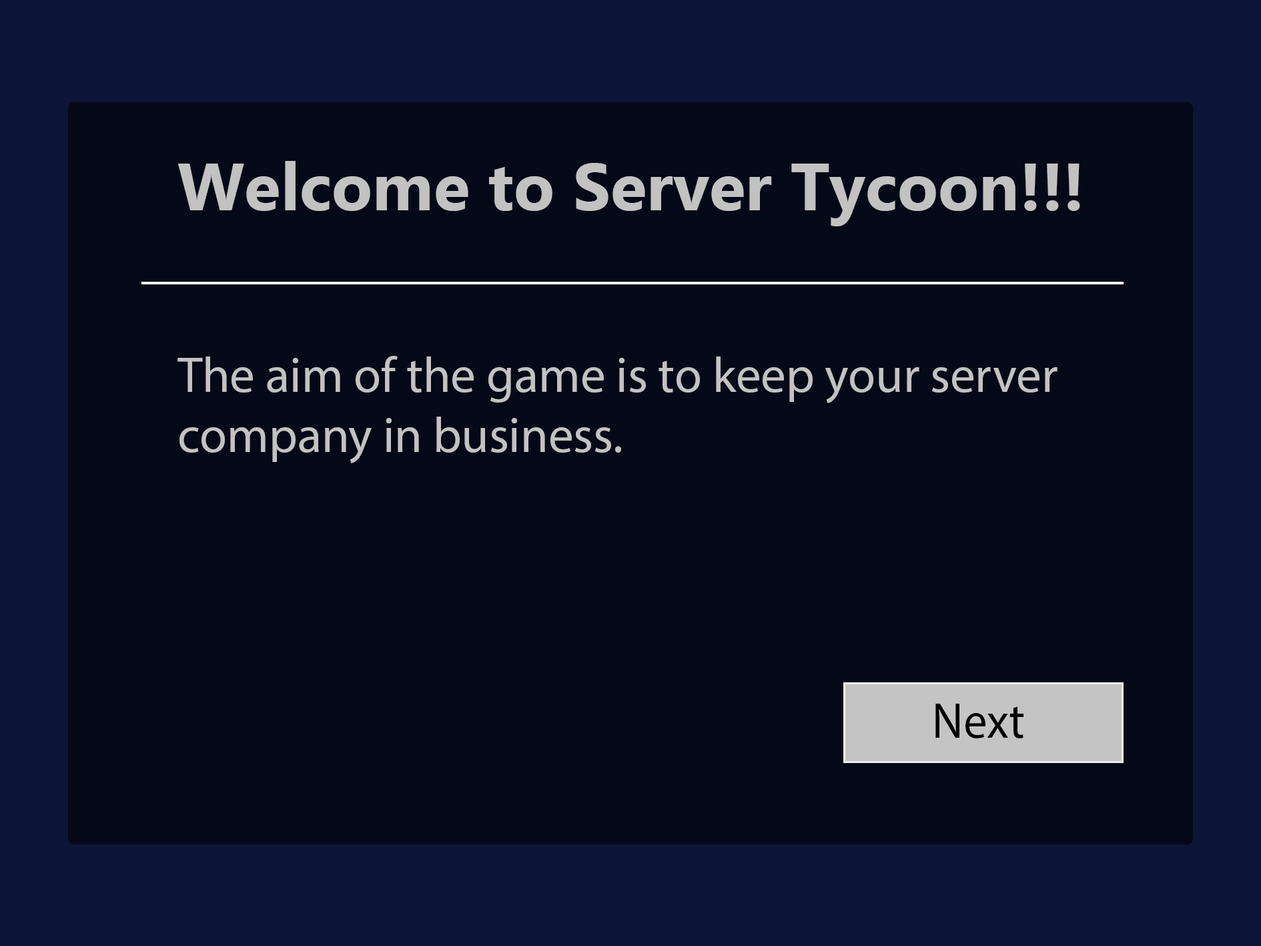
<style>
.page{position:relative;width:1261px;height:946px;background:#050817}
.page>*{position:absolute;margin:0}
.t1{font:66.7px "Ebrima-Bold";color:#c2c2c2}
.t2{font:50px "MyriadPro-Regular";color:#c2c2c2}
.t3{font:50px "MyriadPro-Regular";color:#000000;scale:0.94 1}
</style>
<div class="page">
<p class="t1" style="left:178px;top:161px;width:902px;height:65px">Welcome to Server Tycoon!!!</p>
<p class="t2" style="left:177px;top:356px;width:881px;height:107px">The aim of the game is to keep your server company in business.</p>
<p class="t3" style="left:936px;top:703px;width:88px;height:35px">Next</p>
</div>
